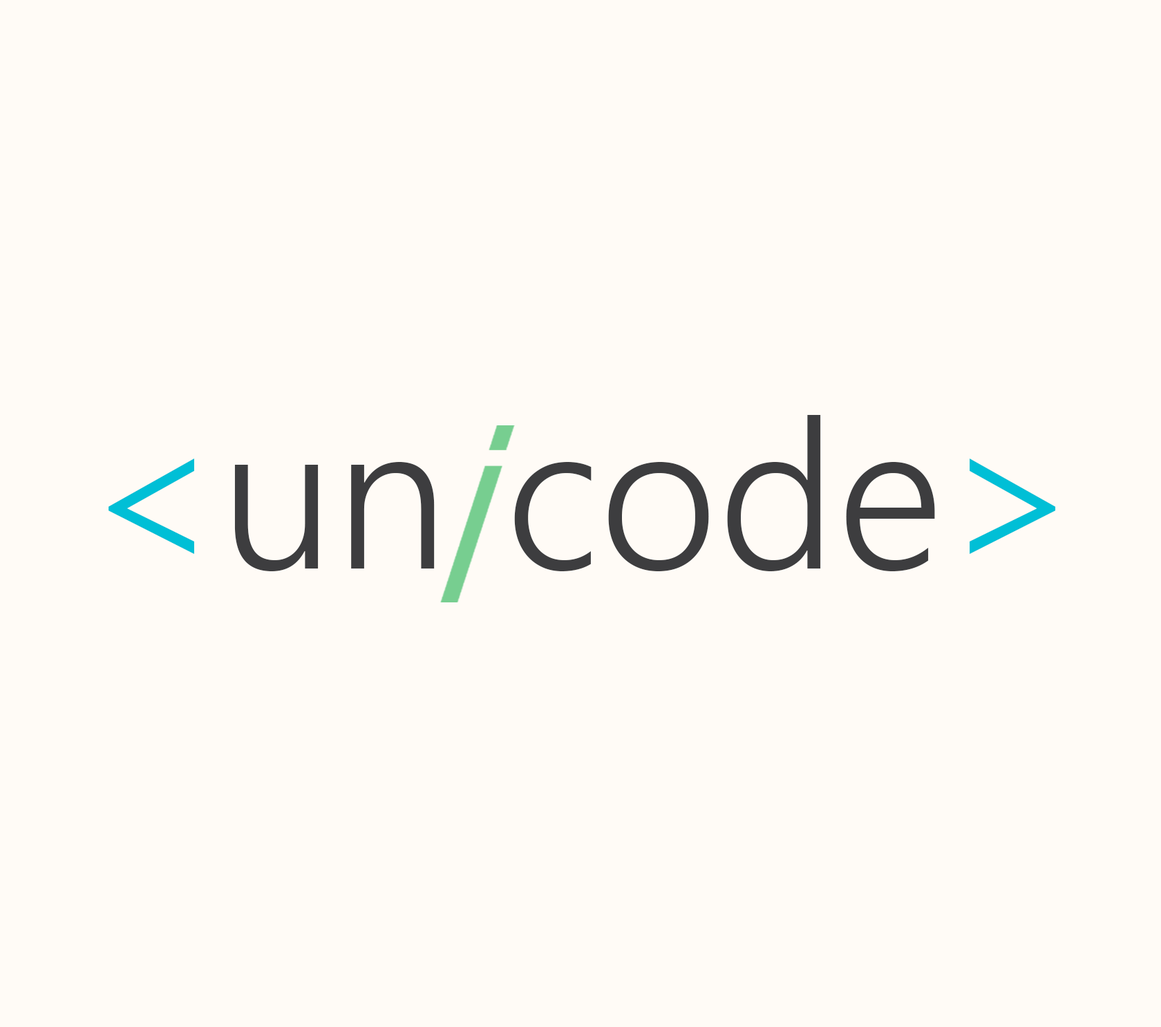
<style>
.page{position:relative;width:1161px;height:1027px;background:#fffbf6}
.page>*{position:absolute;margin:0}
.t1{font:207.4px "LeelawadeeUI-Semilight";color:#3d3d3f}
.t2{font:207.4px "LeelawadeeUI-Semilight";color:#00bfd6}
</style>
<div class="page">
<p class="t1" style="left:109px;top:415px;width:947px;height:156px"><span class="t2">&lt;</span>un code<span class="t2">&gt;</span></p>
</div>
